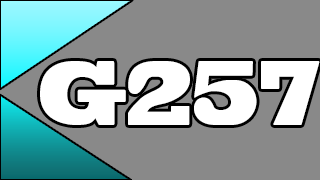
<style>
.page{position:relative;width:320px;height:180px;background:#898989}
.page>*{position:absolute;margin:0}
.t1{font:85.6px "BlackoakStd";color:#ffffff;scale:0.55 1}
</style>
<div class="page">
<p class="t1" style="left:40px;top:61px;width:280px;height:64px">G257</p>
</div>
